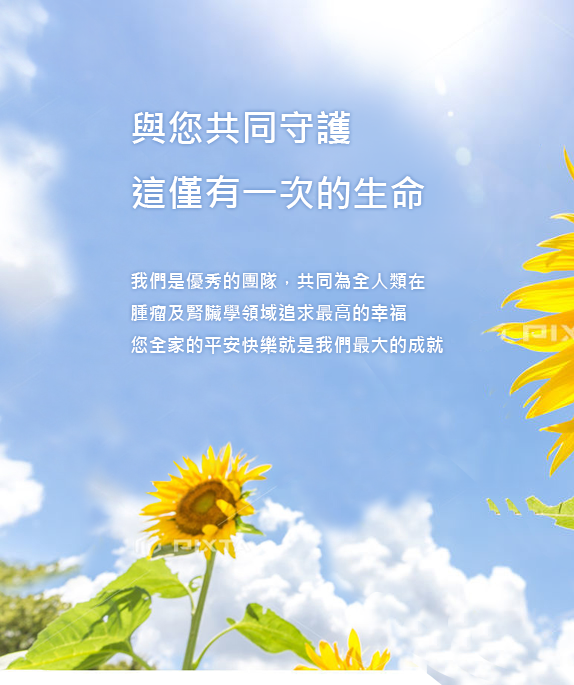
<style>
.page{position:relative;width:574px;height:685px}
.page>*{position:absolute;margin:0}
.t1{font:18.5px "MicrosoftJhengHeiBold";color:#ffffff}
.t2{font:37px "MicrosoftJhengHeiBold";color:#ffffff}
</style>
<div class="page">
<p class="t1" style="left:131px;top:111px;width:312px;height:243px"><span class="t2">與您共同守護<br>這僅有一次的生命</span><br><br>我們是優秀的團隊，共同為全人類在<br>腫瘤及腎臟學領域追求最高的幸福<br>您全家的平安快樂就是我們最大的成就</p>
</div>
